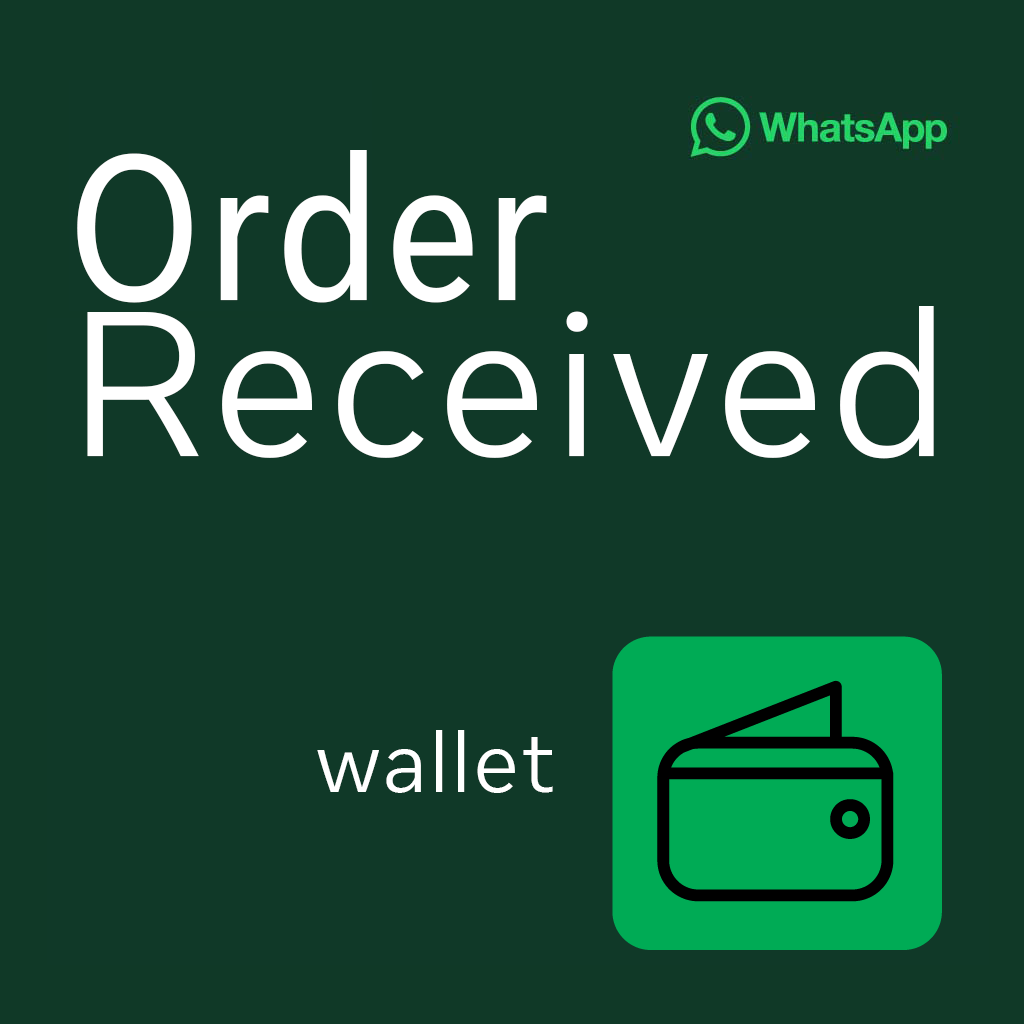
<style>
.page{position:relative;width:1024px;height:1024px;background:#103928}
.page>*{position:absolute;margin:0}
.t1{font:205px/156px "Optimistic-LightDM95";letter-spacing:0.02em;color:#ffffff}
.t2{font:205px/156px "Optimistic-RegularDM80";letter-spacing:0.02em;color:#ffffff}
.t3{font:85px "Optimistic-LightDM95";letter-spacing:0.02em;color:#ffffff}
</style>
<div class="page">
<p class="t1" style="left:77px;top:150px;width:857px;height:309px"><span class="t2">Order<br></span>Received</p>
<p class="t3" style="left:317px;top:730px;width:236px;height:63px">wallet</p>
</div>
